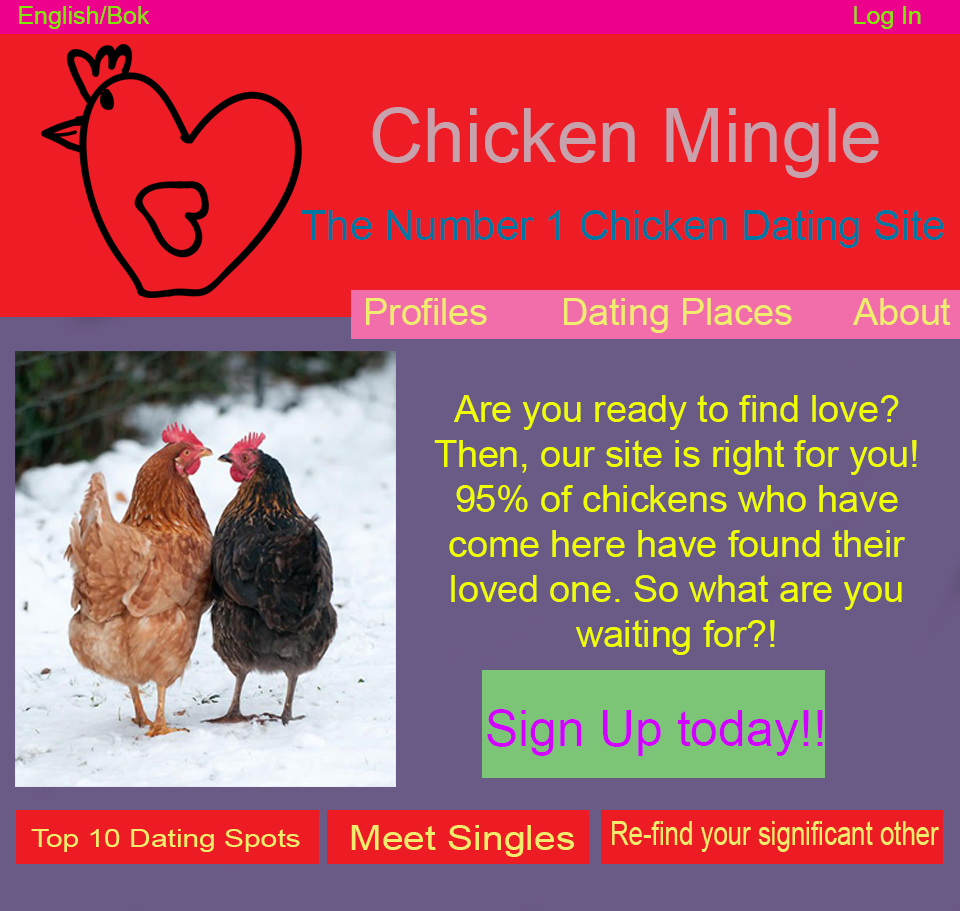
<style>
.page{position:relative;width:960px;height:911px;background:#6a5a86}
.page>*{position:absolute;margin:0}
.t1{font:25px "ArialMT";color:#7aec00}
.t2{font:75px "ArialMT";color:#c7a1ac}
.t3{font:41.7px "ArialMT";color:#0076a3}
.t4{font:37.5px "ArialMT";color:#f0ec6e}
.t5{font:37.5px "ArialMT";color:#f0ff00}
.t6{font:50px "ArialMT";color:#d200ff}
.t7{font:32.6px "ArialMT";color:#f0ec6e;scale:0.79 1}
.t8{font:25px "ArialMT";color:#f0ec6e;scale:1.2 1}
.t9{font:34.2px "ArialMT";color:#f0ec6e;scale:1.14 1}
</style>
<div class="page">
<p class="t1" style="left:19px;top:6px;width:131px;height:23px">English/Bok</p>
<p class="t1" style="left:854px;top:6px;width:67px;height:23px">Log In</p>
<p class="t2" style="left:372px;top:107px;width:507px;height:71px">Chicken Mingle</p>
<p class="t3" style="left:302px;top:210px;width:642px;height:38px">The Number 1 Chicken Dating Site</p>
<p class="t4" style="left:366px;top:298px;width:585px;height:35px">Profiles       Dating Places      About</p>
<p class="t5" style="left:434px;top:395px;width:483px;height:260px;text-align:center">Are you ready to find love?<br>Then, our site is right for you! 95% of chickens who have come here have found their loved one. So what are you waiting for?!</p>
<p class="t6" style="left:487px;top:709px;width:336px;height:47px">Sign Up today!!</p>
<p class="t7" style="left:612px;top:821px;width:327px;height:31px">Re-find your significant other</p>
<p class="t8" style="left:31px;top:829px;width:269px;height:23px">Top 10 Dating Spots</p>
<p class="t9" style="left:351px;top:825px;width:223px;height:32px">Meet Singles</p>
</div>
